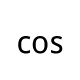
<style>
.page{position:relative;width:80px;height:80px;background:#ffffff}
.page>*{position:absolute;margin:0}
.t1{font:31.8px "DroidSans";color:#000000}
</style>
<div class="page">
<p class="t1" style="left:18px;top:36px;width:45px;height:18px">cos</p>
</div>
